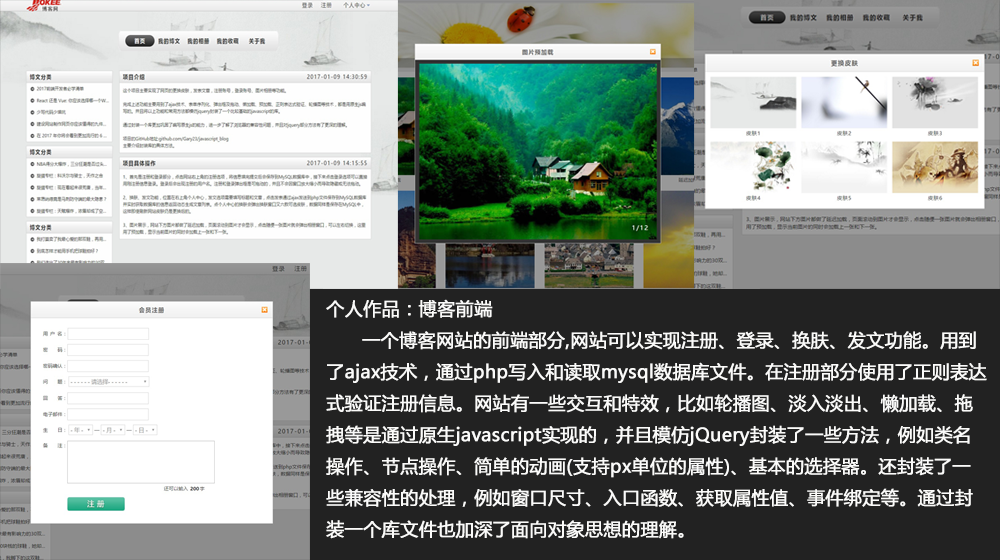
<style>
.page{position:relative;width:1000px;height:560px;background:#222222}
.page>*{position:absolute;margin:0}
.t1{font:18px "MicrosoftYaHei";color:#fbfbfa;font-weight:bold}
</style>
<div class="page">
<p class="t1" style="left:326px;top:299px;width:661px;height:240px">个人作品：博客前端<br> 一个博客网站的前端部分,网站可以实现注册、登录、换肤、发文功能。用到<br>了ajax技术，通过php写入和读取mysql数据库文件。在注册部分使用了正则表达<br>式验证注册信息。网站有一些交互和特效，比如轮播图、淡入淡出、懒加载、拖<br>拽等是通过原生javascript实现的，并且模仿jQuery封装了一些方法，例如类名<br>操作、节点操作、简单的动画(支持px单位的属性)、基本的选择器。还封装了一<br>些兼容性的处理，例如窗口尺寸、入口函数、获取属性值、事件绑定等。通过封<br>装一个库文件也加深了面向对象思想的理解。</p>
</div>
